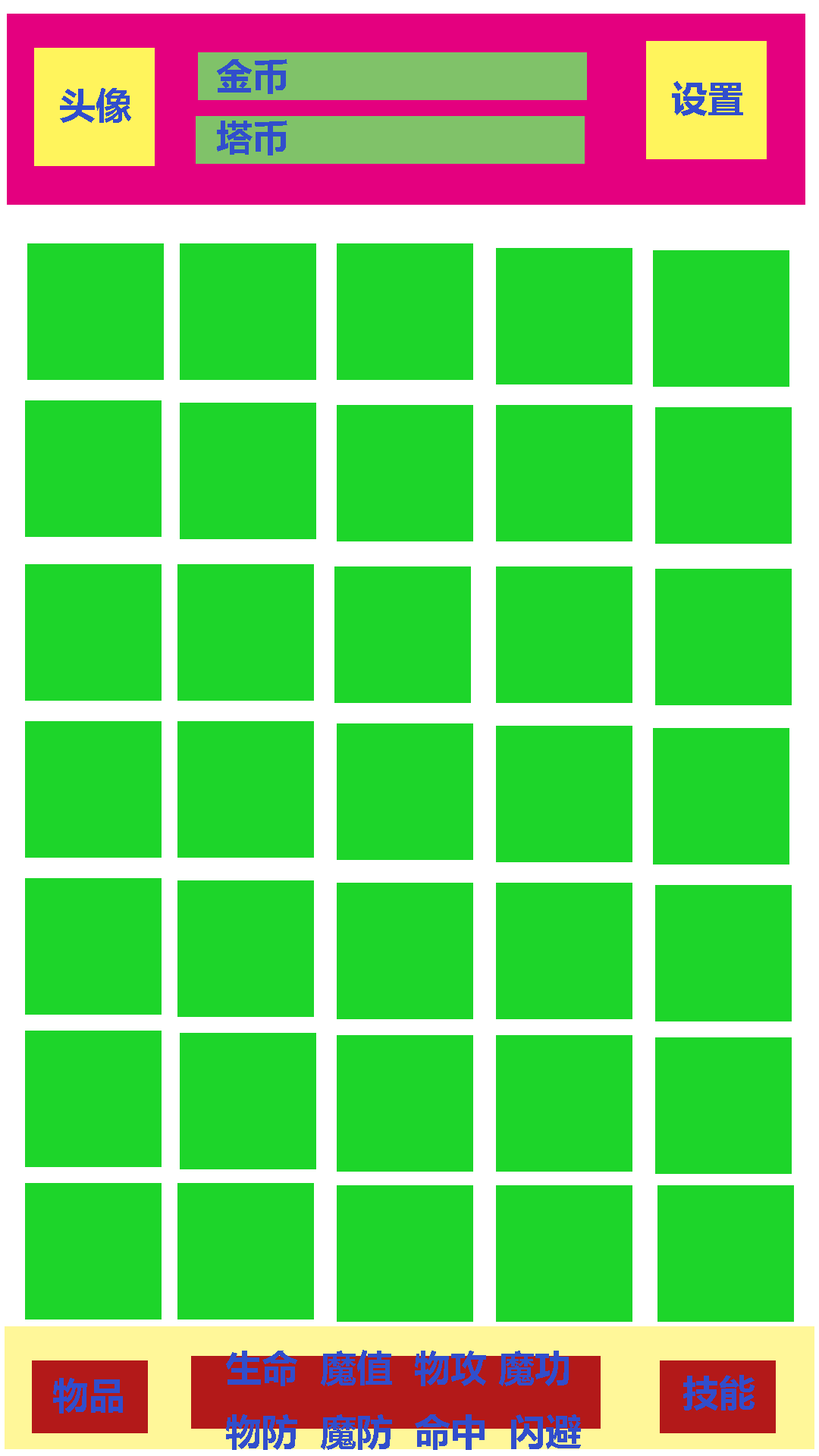
<style>
.page{position:relative;width:819px;height:1456px;background:#1dd52a}
.page>*{position:absolute;margin:0}
.t1{font:36.4px "MicrosoftYaHei-Bold";color:#314ecc}
</style>
<div class="page">
<p class="t1" style="left:217px;top:59px;width:70px;height:35px">金币</p>
<p class="t1" style="left:60px;top:88px;width:71px;height:35px">头像</p>
<p class="t1" style="left:672px;top:81px;width:71px;height:35px">设置</p>
<p class="t1" style="left:217px;top:121px;width:70px;height:34px">塔币</p>
<p class="t1" style="left:226px;top:1350px;width:355px;height:100px">生命  魔值  物攻 魔功<br>物防  魔防  命中  闪避</p>
<p class="t1" style="left:53px;top:1378px;width:70px;height:36px">物品</p>
<p class="t1" style="left:683px;top:1375px;width:72px;height:35px">技能</p>
</div>
